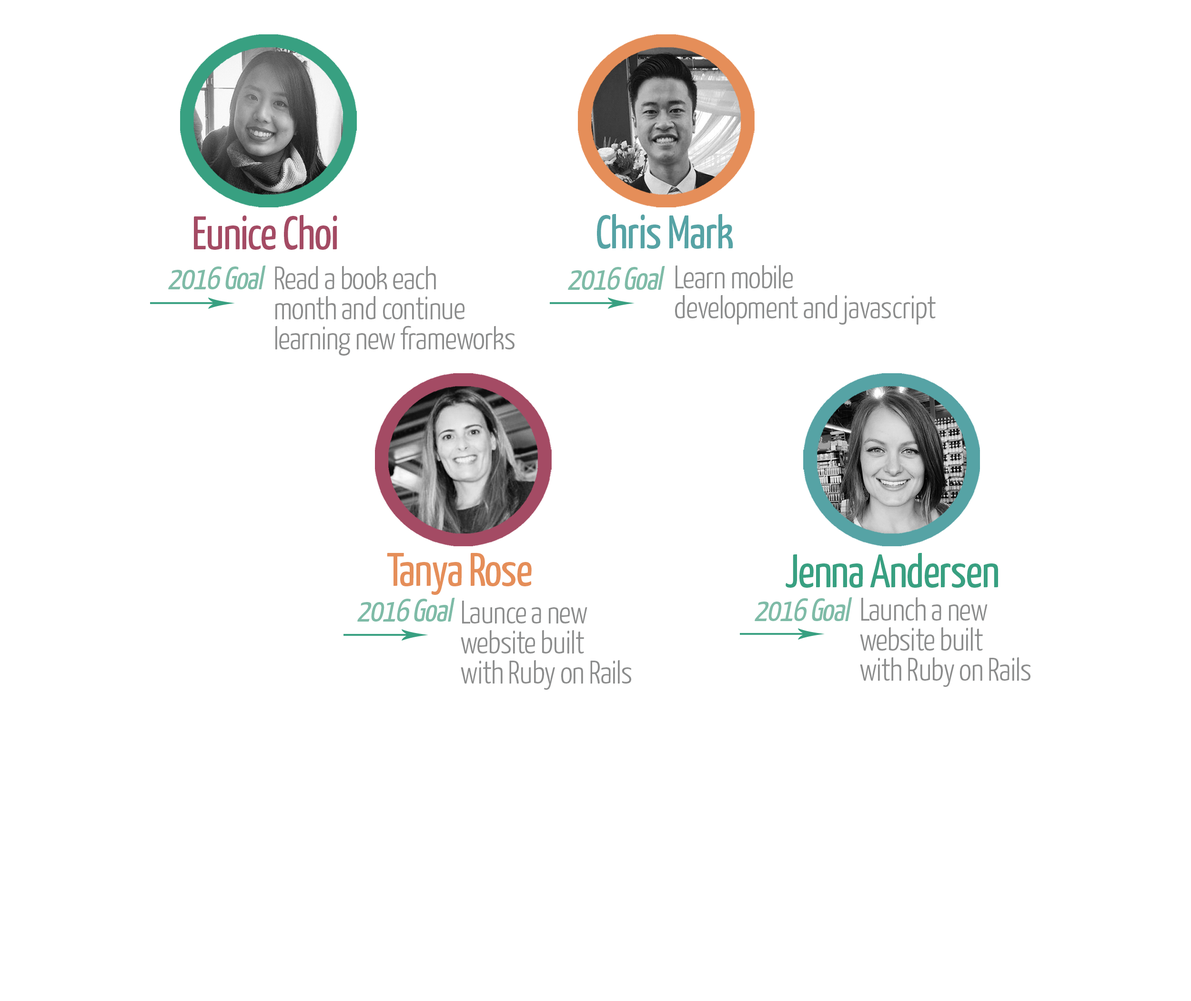
<style>
.page{position:relative;width:1191px;height:1001px;background:#ffffff}
.page>*{position:absolute;margin:0}
.t1{font:46.8px "YanoneKaffeesatz-Regular";letter-spacing:-0.02em;color:#a44b64}
.t2{font:46.8px "YanoneKaffeesatz-Regular";letter-spacing:-0.02em;color:#56a3a5}
.t3{font:32.5px "YanoneKaffeesatz-Regular";letter-spacing:-0.02em;color:#7ebba7;font-style:italic}
.t4{font:31.9px/30px "YanoneKaffeesatz-Light";letter-spacing:-0.02em;color:#8b8c8c}
.t5{font:46.8px "YanoneKaffeesatz-Regular";letter-spacing:-0.02em;color:#e58e59}
.t6{font:46.8px "YanoneKaffeesatz-Regular";letter-spacing:-0.02em;color:#38a081}
</style>
<div class="page">
<p class="t1" style="left:194px;top:215px;width:143px;height:35px">Eunice Choi</p>
<p class="t2" style="left:597px;top:214px;width:136px;height:35px">Chris Mark</p>
<p class="t3" style="left:168px;top:265px;width:98px;height:24px">2016 Goal</p>
<p class="t4" style="left:275px;top:266px;width:240px;height:90px">Read a book each <br>month and continue<br>learning new frameworks</p>
<p class="t3" style="left:568px;top:266px;width:97px;height:24px">2016 Goal</p>
<p class="t4" style="left:675px;top:265px;width:261px;height:60px">Learn mobile <br>development and javascript</p>
<p class="t5" style="left:387px;top:553px;width:145px;height:42px">Tanya Rose</p>
<p class="t6" style="left:786px;top:553px;width:212px;height:35px">Jenna Andersen</p>
<p class="t3" style="left:357px;top:598px;width:98px;height:23px">2016 Goal</p>
<p class="t4" style="left:461px;top:600px;width:170px;height:90px">Launce a new<br>website built<br>with Ruby on Rails</p>
<p class="t3" style="left:755px;top:597px;width:98px;height:24px">2016 Goal</p>
<p class="t4" style="left:860px;top:597px;width:171px;height:90px">Launch a new<br>website built<br>with Ruby on Rails</p>
</div>
